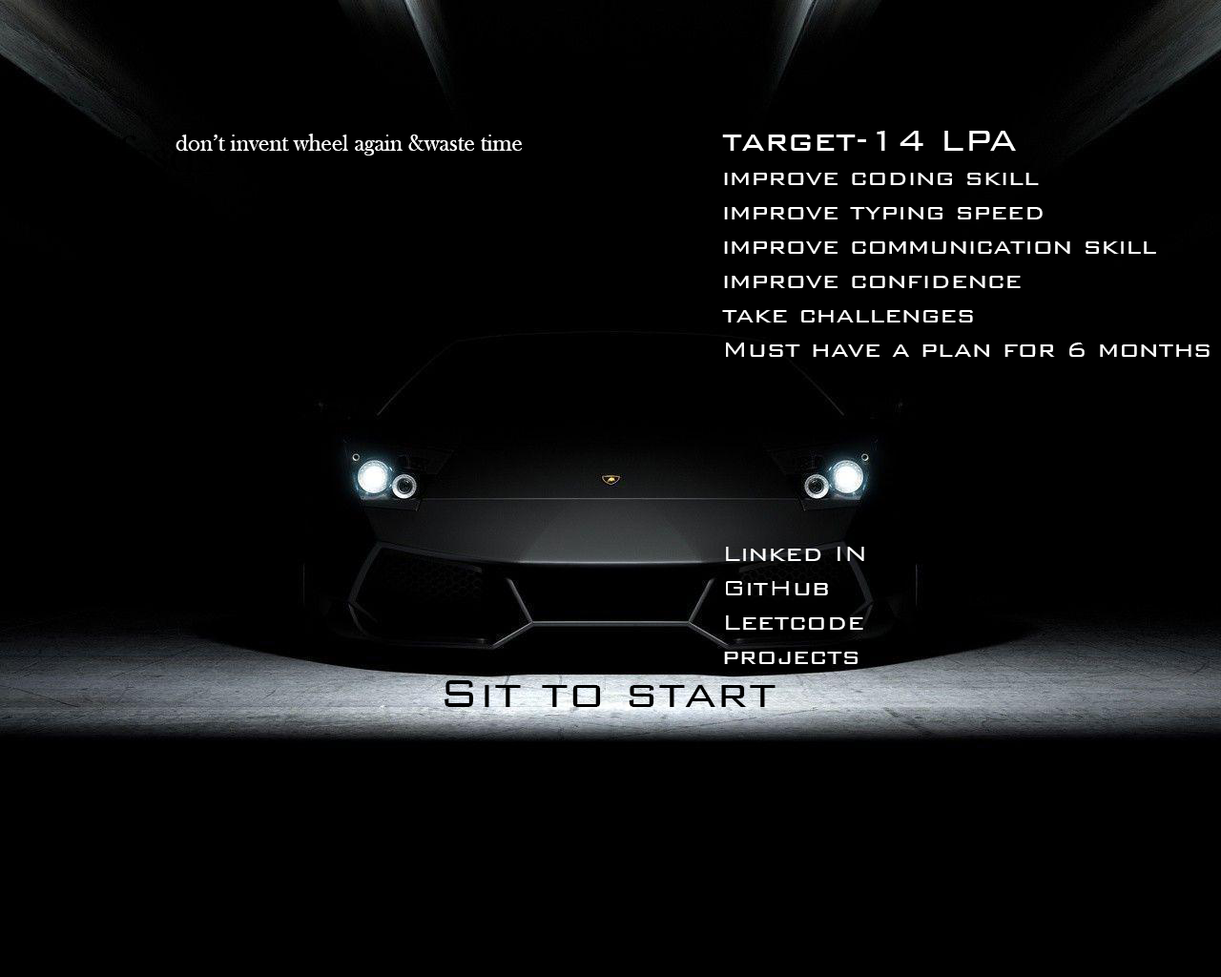
<style>
.page{position:relative;width:1221px;height:977px;background:#000000}
.page>*{position:absolute;margin:0}
.t1{font:23.8px "BaskOldFace";color:#ffffff}
.t2{font:28.6px "BankGothicBT-Light";color:#ffffff}
.t3{font:38.2px "BankGothicBT-Light";color:#ffffff}
.t4{font:52.5px "BankGothicBT-Light";color:#000000}
</style>
<div class="page">
<p class="t1" style="left:176px;top:134px;width:346px;height:21px">don’t invent wheel again &amp;waste time</p>
<p class="t2" style="left:722px;top:131px;width:487px;height:226px"><span class="t3">target-14 LPA<br></span>improve coding skill<br>improve typing speed<br>improve communication skill<br>improve confidence<br>take challenges<br>Must have a plan for 6 months</p>
<p class="t2" style="left:724px;top:547px;width:140px;height:117px">Linked IN<br>GitHub<br>Leetcode<br>projects</p>
<p class="t4" style="left:444px;top:680px;width:331px;height:27px">Sit to start</p>
</div>
